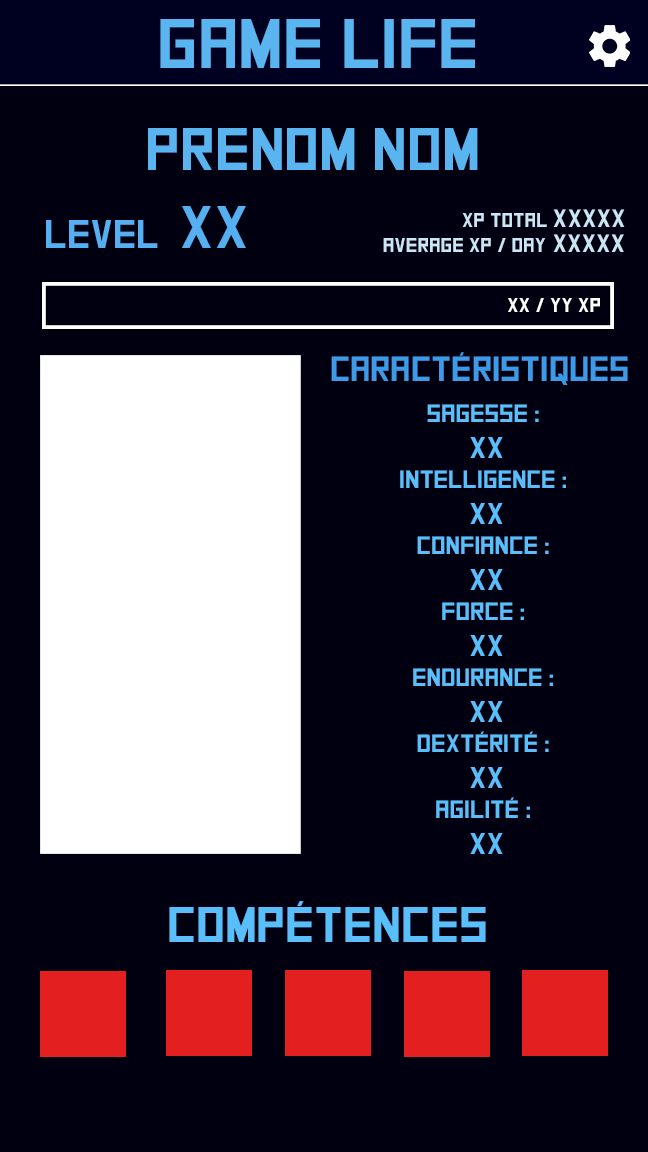
<style>
.page{position:relative;width:648px;height:1152px;background:#000011}
.page>*{position:absolute;margin:0}
.t1{font:70px "SquareFont";color:#5ab4f0}
.t2{font:60px "SquareFont";color:#5ab4f0}
.t3{font:40px "SquareFont";color:#55aff0}
.t4{font:60px "SquareFont";color:#55aff0}
.t5{font:20px "SquareFont";color:#cae6f4}
.t6{font:25px "SquareFont";color:#cae6f4}
.t7{font:20px "SquareFont";color:#ffffff}
.t8{font:35px "SquareFont";color:#3e99e7}
.t9{font:25px "SquareFont";color:#5abefa}
.t10{font:30px "SquareFont";color:#5abefa}
.t11{font:50px "SquareFont";color:#5abefa}
</style>
<div class="page">
<p class="t1" style="left:160px;top:19px;width:315px;height:49px">Game Life</p>
<p class="t2" style="left:148px;top:128px;width:330px;height:42px">Prenom Nom</p>
<p class="t3" style="left:46px;top:206px;width:200px;height:42px">level  <span class="t4">XX</span></p>
<p class="t5" style="left:462px;top:209px;width:163px;height:18px">xp total <span class="t6">XXXXX</span></p>
<p class="t5" style="left:383px;top:234px;width:241px;height:18px">Average xp / day<span class="t6"> XXXXX</span></p>
<p class="t7" style="left:508px;top:298px;width:92px;height:14px">XX / YY xP</p>
<p class="t8" style="left:331px;top:352px;width:297px;height:33px">Caractéristiques</p>
<p class="t9" style="left:400px;top:404px;width:166px;height:450px;text-align:center">Sagesse : <br><span class="t10">XX<br></span>Intelligence : <br><span class="t10">XX<br></span>Confiance : <br><span class="t10">XX<br></span>Force : <br><span class="t10">XX<br></span>Endurance : <br><span class="t10">XX<br></span>Dextérité : <br><span class="t10">XX<br></span>Agilité : <br><span class="t10">XX</span></p>
<p class="t11" style="left:169px;top:901px;width:317px;height:41px">Compétences</p>
</div>
